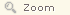
<style>
.page{position:relative;width:70px;height:15px;background:#fcf9ea}
.page>*{position:absolute;margin:0}
.t1{font:10px "Verdana";color:#746b6b}
</style>
<div class="page">
<p class="t1" style="left:24px;top:4px;width:30px;height:7px">Zoom</p>
</div>
